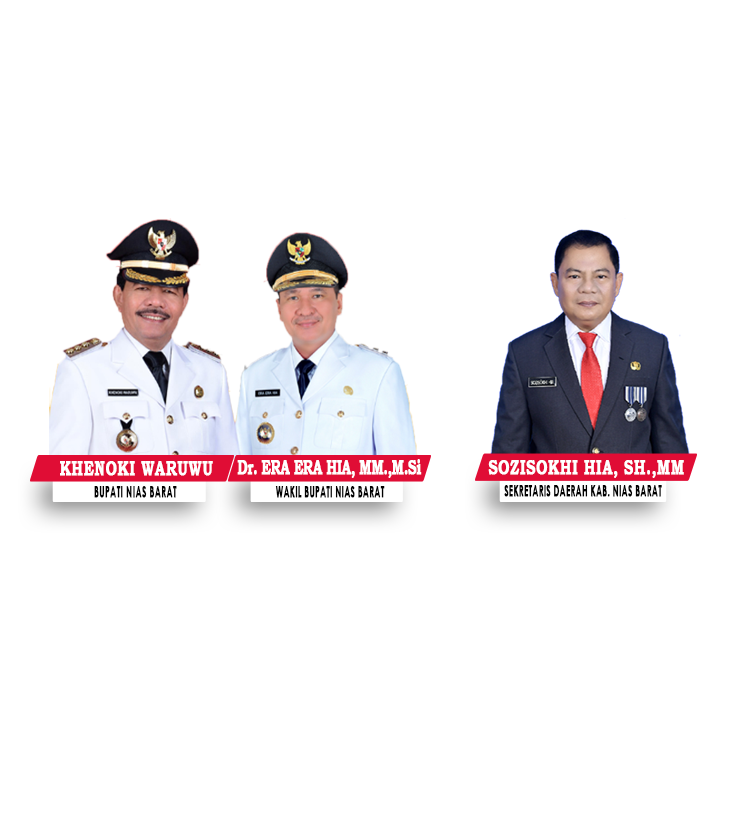
<style>
.page{position:relative;width:736px;height:823px;background:#ffffff}
.page>*{position:absolute;margin:0}
.t1{font:19.7px "BookmanOldStyle-Bold";letter-spacing:0.02em;color:#ffffff;font-weight:bold;scale:0.72 1}
.t2{font:20px "BookmanOldStyle-Bold";letter-spacing:-0.05em;color:#ffffff;font-weight:bold;scale:0.66 1}
.t3{font:14.7px "CenturyGothic-Bold";letter-spacing:0.02em;color:#000000;text-transform:uppercase;font-weight:bold;scale:0.57 1}
.t4{font:14.7px "CenturyGothic-Bold";color:#000000;text-transform:uppercase;font-weight:bold;scale:0.57 1}
</style>
<div class="page">
<p class="t1" style="left:60px;top:461px;width:153px;height:15px">KHENOKI WARUWU</p>
<p class="t2" style="left:237px;top:459px;width:185px;height:19px">Dr. ERA ERA HIA, MM.,M.Si</p>
<p class="t1" style="left:488px;top:460px;width:196px;height:18px">SOZISOKHI HIA, SH.,MM</p>
<p class="t3" style="left:94px;top:486px;width:83px;height:12px">BUPATI Nias Barat</p>
<p class="t4" style="left:275px;top:486px;width:110px;height:12px">WAKIL BUPATI Nias Barat</p>
<p class="t4" style="left:504px;top:485px;width:158px;height:12px">Sekretaris Daerah Kab. Nias Barat</p>
</div>
